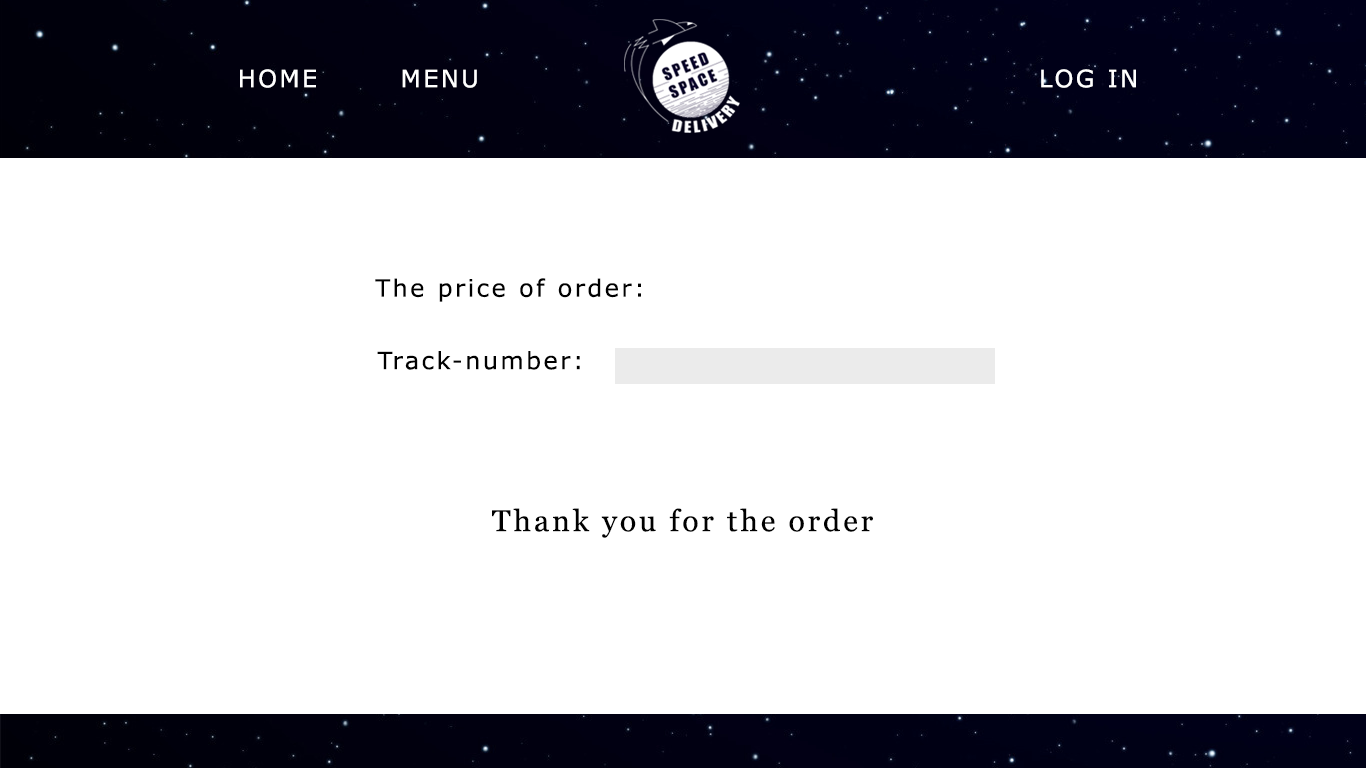
<style>
.page{position:relative;width:1366px;height:768px;background:#ffffff}
.page>*{position:absolute;margin:0}
.t1{font:24px "Verdana";letter-spacing:0.1em;color:#ffffff}
.t2{font:24px "Verdana";letter-spacing:0.1em;color:#000000}
.t3{font:30px "Georgia";letter-spacing:0.1em;color:#000000}
</style>
<div class="page">
<p class="t1" style="left:240px;top:69px;width:76px;height:19px">HOME</p>
<p class="t1" style="left:402px;top:69px;width:75px;height:19px">MENU</p>
<p class="t1" style="left:1041px;top:69px;width:95px;height:19px">LOG IN</p>
<p class="t2" style="left:375px;top:278px;width:266px;height:24px">The price of order:</p>
<p class="t2" style="left:377px;top:351px;width:203px;height:19px">Track-number:</p>
<p class="t3" style="left:492px;top:508px;width:381px;height:30px">Thank you for the order</p>
</div>
